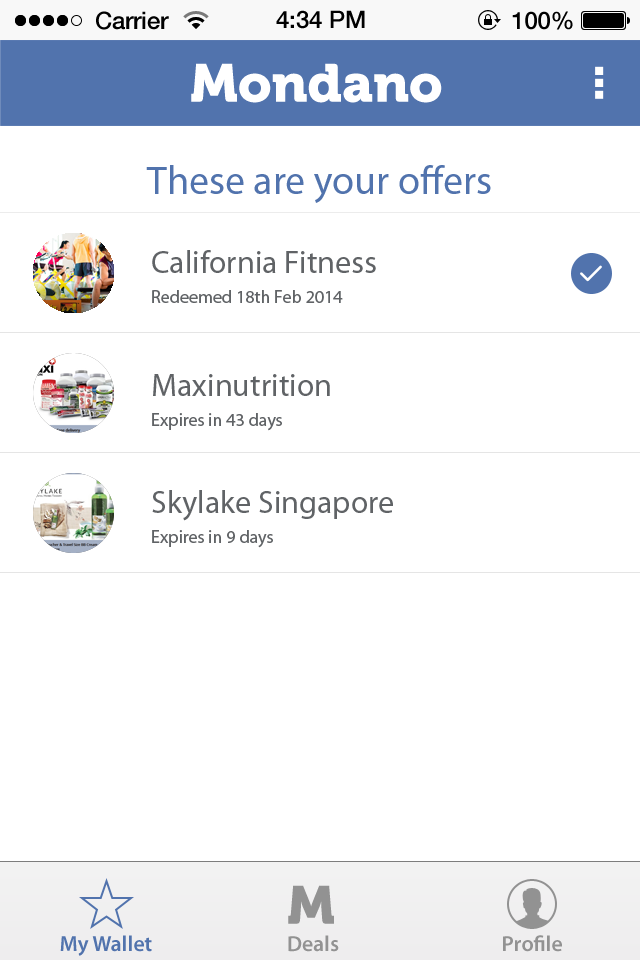
<style>
.page{position:relative;width:640px;height:960px;background:#ffffff}
.page>*{position:absolute;margin:0}
.t1{font:24px "HelveticaNeue-Medium";color:#000000}
.t2{font:53.3px "Museo900-Regular";color:#ffffff}
.t3{font:40px "MyriadPro-Regular";color:#5173ad}
.t4{font:18px/30px "MyriadPro-Regular";color:#606366}
.t5{font:32px/30px "MyriadPro-Regular";color:#606366}
.t6{font:53.3px "Museo900-Regular";color:#929292}
.t7{font:22px "MyriadPro-Semibold";color:#5173ad}
.t8{font:22px "MyriadPro-Semibold";color:#929292}
</style>
<div class="page">
<p class="t1" style="left:96px;top:11px;width:73px;height:19px">Carrier</p>
<p class="t1" style="left:276px;top:10px;width:89px;height:19px">4:34 PM</p>
<p class="t1" style="left:512px;top:11px;width:61px;height:19px">100%</p>
<p class="t2" style="left:191px;top:63px;width:251px;height:40px">Mondano</p>
<p class="t3" style="left:146px;top:165px;width:345px;height:38px">These are your offers</p>
<p class="t4" style="left:152px;top:250px;width:224px;height:53px"><span class="t5">California Fitness<br></span>Redeemed 18th Feb 2014</p>
<p class="t4" style="left:152px;top:374px;width:178px;height:57px"><span class="t5">Maxinutrition<br></span>Expires in 43 days</p>
<p class="t5" style="left:152px;top:490px;width:241px;height:58px">Skylake Singapore<br><span class="t4">Expires in 9 days</span></p>
<p class="t6" style="left:288px;top:885px;width:46px;height:39px">M</p>
<p class="t7" style="left:60px;top:935px;width:92px;height:21px">My Wallet</p>
<p class="t8" style="left:288px;top:935px;width:51px;height:17px">Deals</p>
<p class="t8" style="left:503px;top:935px;width:59px;height:17px">Profile</p>
</div>
